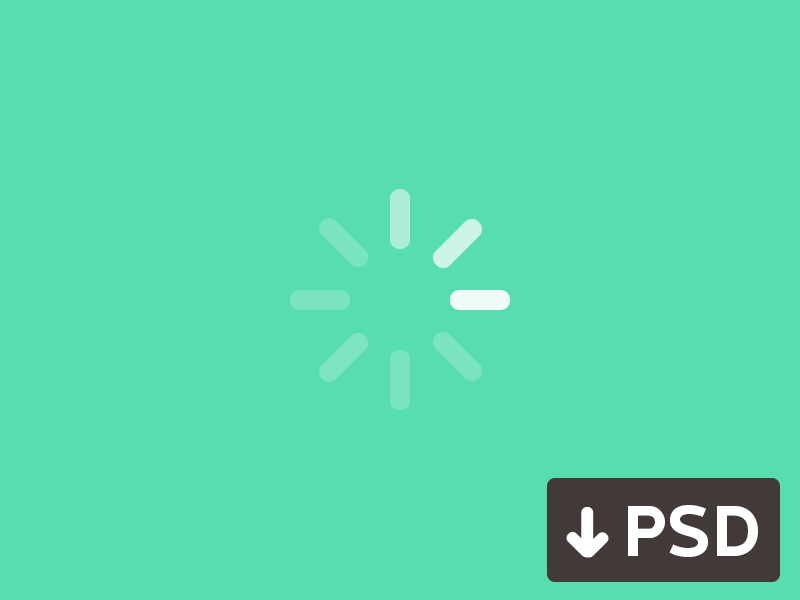
<style>
.page{position:relative;width:800px;height:600px;background:#58ddaf}
.page>*{position:absolute;margin:0}
.t1{font:72px "CentraleSans-Bold";color:#ffffff}
</style>
<div class="page">
<p class="t1" style="left:628px;top:505px;width:130px;height:52px">PSD</p>
</div>
